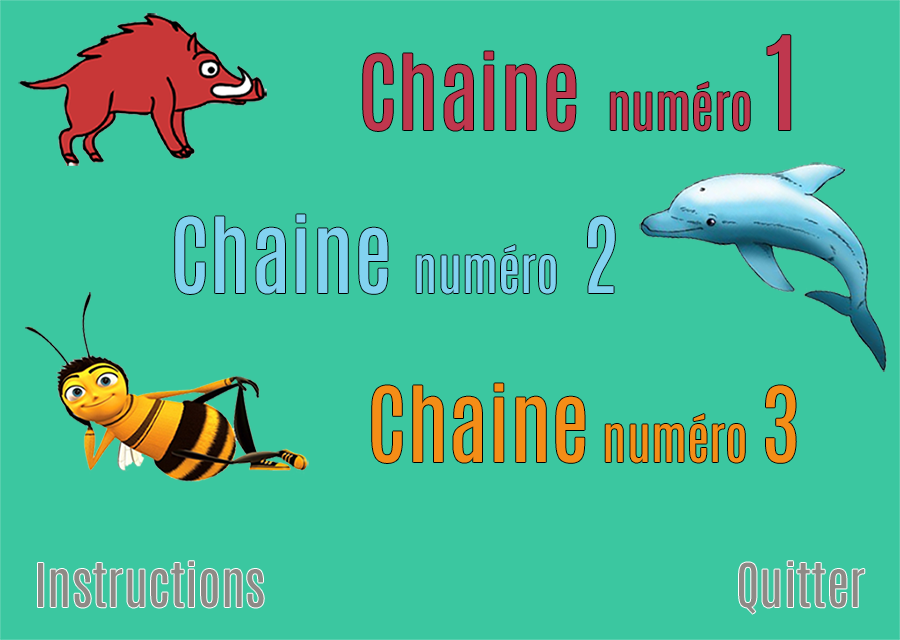
<style>
.page{position:relative;width:900px;height:640px;background:#3bc7a0}
.page>*{position:absolute;margin:0}
.t1{font:87.9px "Antonio-Regular";color:#bf374e}
.t2{font:51.3px "Antonio-Regular";color:#bf374e}
.t3{font:109.9px "Antonio-Regular";color:#bf374e}
.t4{font:87.9px "Antonio-Regular";color:#82d2f0}
.t5{font:51.3px "Antonio-Regular";color:#82d2f0}
.t6{font:87.9px "Antonio-Regular";color:#f48d17}
.t7{font:51.3px "Antonio-Regular";color:#f48d17}
.t8{font:51.3px "Antonio-Regular";color:#8e8a86}
</style>
<div class="page">
<p class="t1" style="left:363px;top:35px;width:428px;height:96px">Chaine <span class="t2">numéro </span><span class="t3">1</span></p>
<p class="t4" style="left:175px;top:214px;width:440px;height:80px">Chaine <span class="t5">numéro</span> 2</p>
<p class="t6" style="left:372px;top:383px;width:424px;height:80px">Chaine<span class="t7"> numéro </span>3</p>
<p class="t8" style="left:38px;top:561px;width:226px;height:47px">Instructions</p>
<p class="t8" style="left:739px;top:561px;width:126px;height:53px">Quitter</p>
</div>
